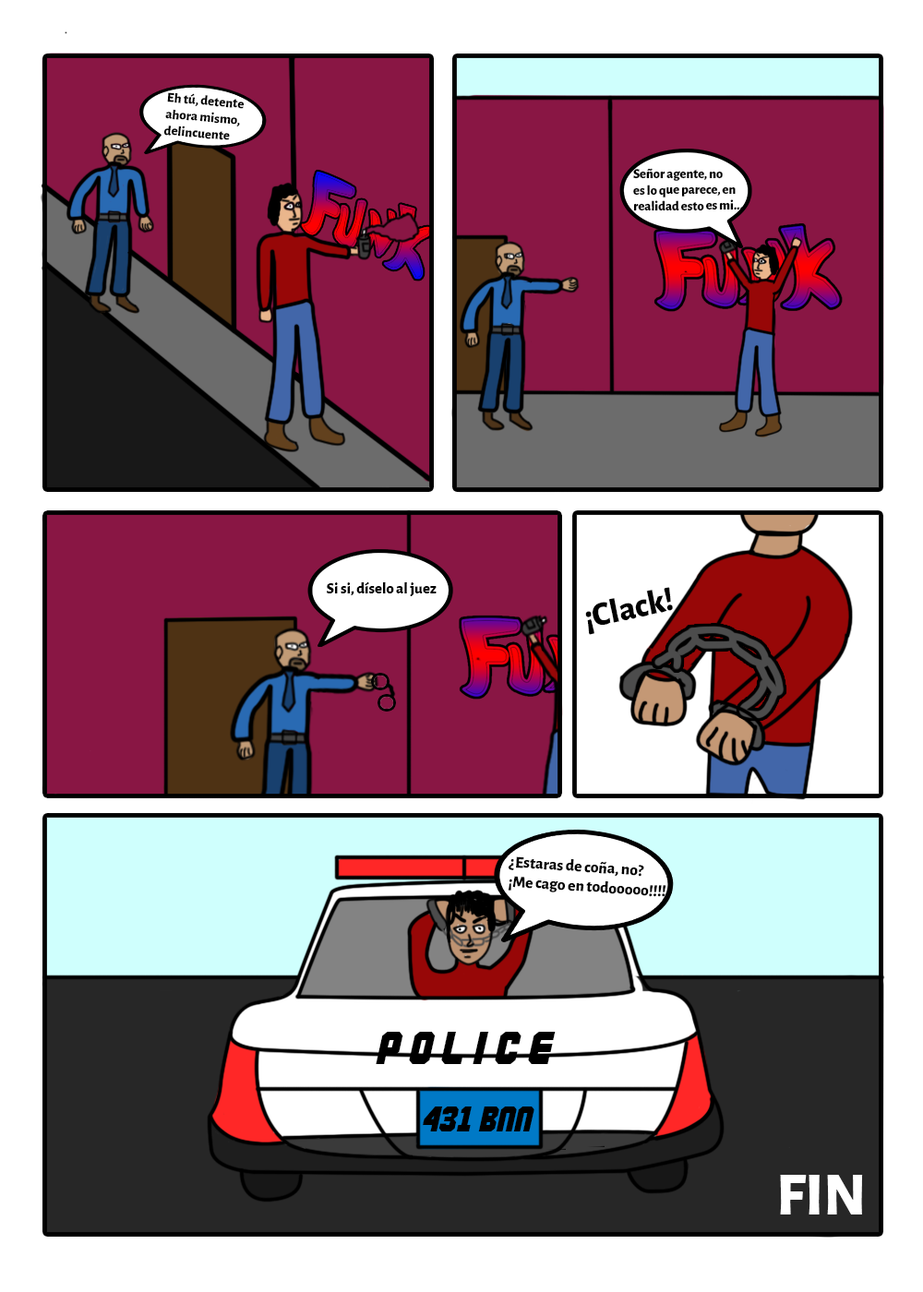
<style>
.page{position:relative;width:923px;height:1292px;background:#ffffff}
.page>*{position:absolute;margin:0}
.t1{font:13.7px "AlegreyaSans-ExtraBold";color:#000000}
.t2{font:13.4px "AlegreyaSans-ExtraBold";color:#000000}
.t3{font:15.4px "AlegreyaSans-ExtraBold";color:#000000}
.t4{font:33.9px "AlegreyaSans-ExtraBold";color:#000000}
.t5{font:16.2px "AlegreyaSans-ExtraBold";color:#000000}
.t6{font:61.5px "AlegreyaSans-ExtraBold";color:#ffffff}
</style>
<div class="page">
<p class="t1" style="left:163px;top:92px;width:81px;height:48px;rotate:5deg">Eh tú, detente <br>ahora mismo, <br>delincuente</p>
<p class="t2" style="left:633px;top:168px;width:110px;height:43px;rotate:-1deg">Señor agente, no <br>es lo que parece, en <br>realidad esto es mi...</p>
<p class="t3" style="left:326px;top:581px;width:111px;height:15px">Si si, díselo al juez</p>
<p class="t4" style="left:585px;top:587px;width:88px;height:48px;rotate:-12deg">¡Clack!</p>
<p class="t5" style="left:508px;top:856px;width:158px;height:41px;rotate:4deg">¿Estaras de coña, no? <br>¡Me cago en todooooo!!!!</p>
<p class="t6" style="left:780px;top:1175px;width:83px;height:40px">FIN</p>
</div>
